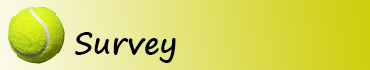
<style>
.page{position:relative;width:370px;height:70px}
.page>*{position:absolute;margin:0}
.t1{font:30px "SegoePrint-Bold";color:#000000}
</style>
<div class="page">
<p class="t1" style="left:75px;top:32px;width:101px;height:31px">Survey</p>
</div>
